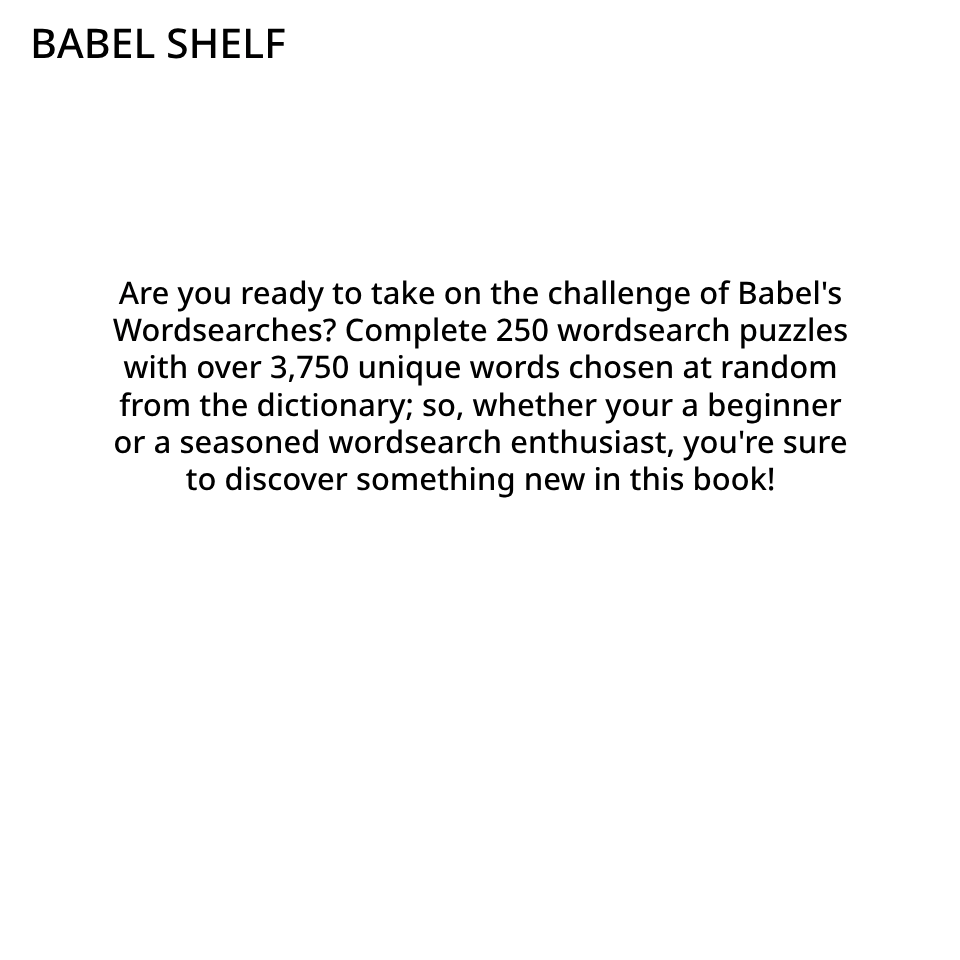
<style>
.page{position:relative;width:960px;height:960px;background:#ffffff}
.page>*{position:absolute;margin:0}
.t1{font:41px "NotoSans-Medium";color:#000000}
.t2{font:31px "NotoSans-Medium";color:#000000}
</style>
<div class="page">
<p class="t1" style="left:33px;top:28px;width:252px;height:31px">BABEL SHELF</p>
<p class="t2" style="left:113px;top:280px;width:734px;height:218px;text-align:center">Are you ready to take on the challenge of Babel's<br>Wordsearches? Complete 250 wordsearch puzzles<br>with over 3,750 unique words chosen at random<br>from the dictionary; so, whether your a beginner<br>or a seasoned wordsearch enthusiast, you're sure<br>to discover something new in this book!</p>
</div>
